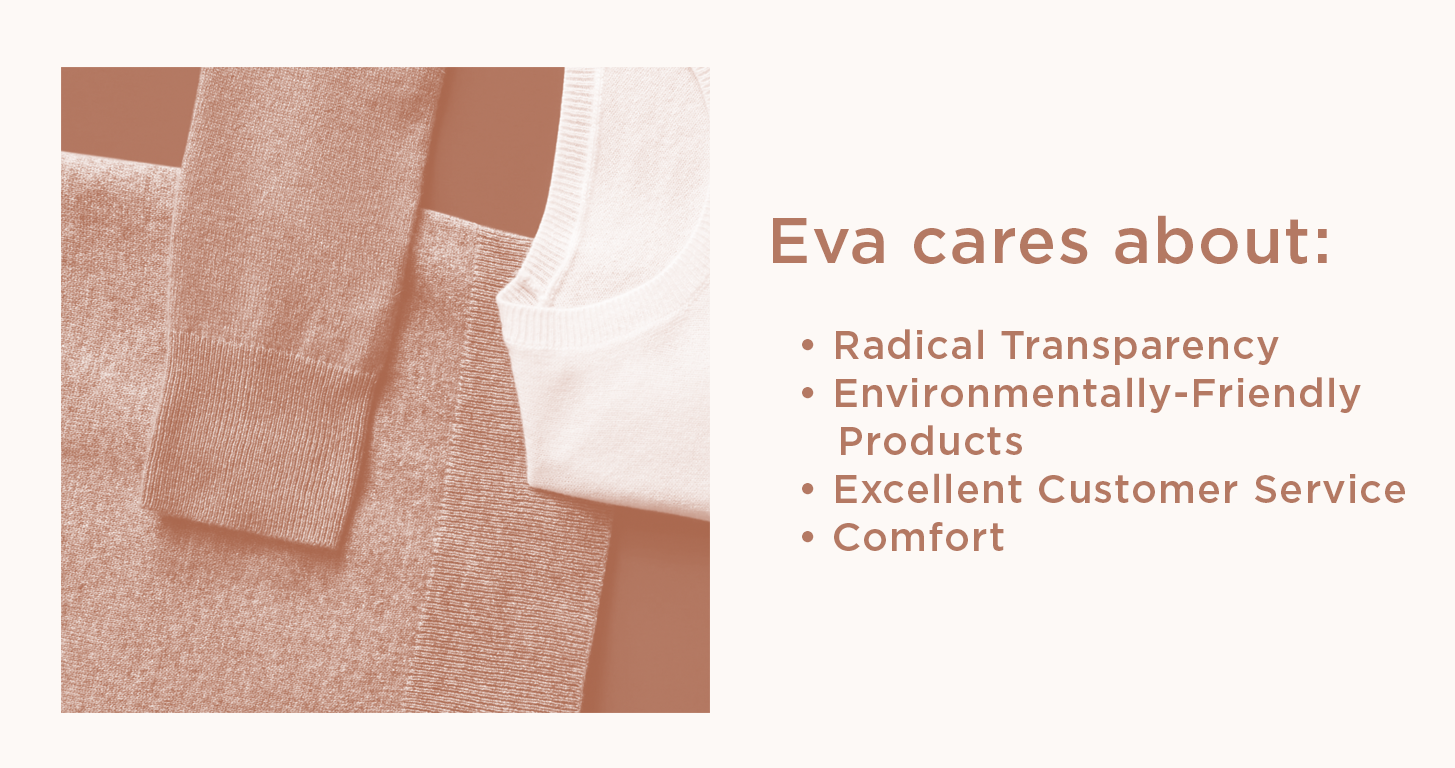
<style>
.page{position:relative;width:1455px;height:768px;background:#fdf9f6}
.page>*{position:absolute;margin:0}
.t1{font:65px "Gotham-Medium";letter-spacing:0.025em;color:#b47963}
.t2{font:40px "Gotham-Medium";letter-spacing:0.025em;color:#b47963}
</style>
<div class="page">
<p class="t1" style="left:773px;top:215px;width:554px;height:49px">Eva cares about:</p>
<p class="t2" style="left:802px;top:329px;width:603px;height:222px">• Radical Transparency<br>• Environmentally-Friendly<br>   Products<br>• Excellent Customer Service<br>• Comfort</p>
</div>
